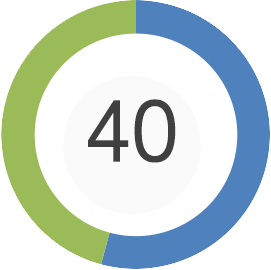
<style>
.page{position:relative;width:271px;height:270px;background:#ffffff}
.page>*{position:absolute;margin:0}
.t1{font:105.8px "TrueTextBOnline-Bold";color:#404040;scale:0.93 1}
</style>
<div class="page">
<p class="t1" style="left:88px;top:99px;width:88px;height:64px">40</p>
</div>
